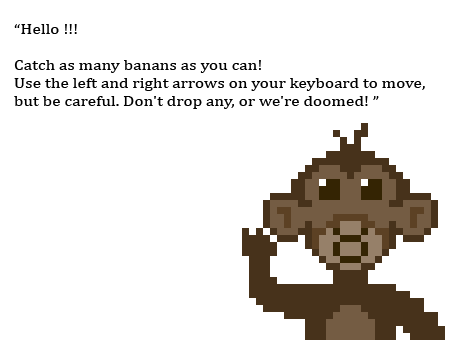
<style>
.page{position:relative;width:454px;height:340px;background:#ffffff}
.page>*{position:absolute;margin:0}
.t1{font:14.9px "Cambria";color:#000000;scale:1.16 1}
</style>
<div class="page">
<p class="t1" style="left:14px;top:24px;width:411px;height:85px">“Hello !!!<br><br>Catch as many banans as you can! <br>Use the left and right arrows on your keyboard to move, <br>but be careful. Don't drop any, or we're doomed! ”</p>
</div>
